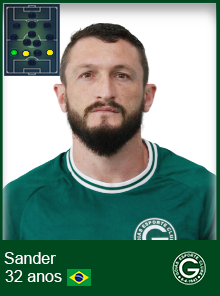
<style>
.page{position:relative;width:220px;height:296px}
.page>*{position:absolute;margin:0}
.t1{font:16px "ArialMT";color:#ffffff}
</style>
<div class="page">
<p class="t1" style="left:4px;top:252px;width:52px;height:12px">Sander</p>
<p class="t1" style="left:5px;top:270px;width:57px;height:12px">32 anos</p>
</div>
